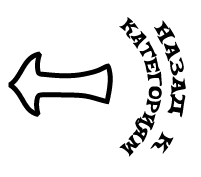
<style>
.page{position:relative;width:201px;height:177px;background:#ffffff}
.page>*{position:absolute;margin:0}
.t1{font:20.3px "CelestiaReduxMedium";color:#000000}
.t2{font:172px "CelestiaReduxMedium";font-weight:bold}
</style>
<div class="page">
<p class="t1" style="left:119px;top:17px;width:67px;height:140px;text-align:center;rotate:90deg">НАЗАД К<br>КАТЕГОРИЯМ</p>
<p class="t2" style="left:8px;top:51px;width:105px;height:66px">←</p>
</div>
